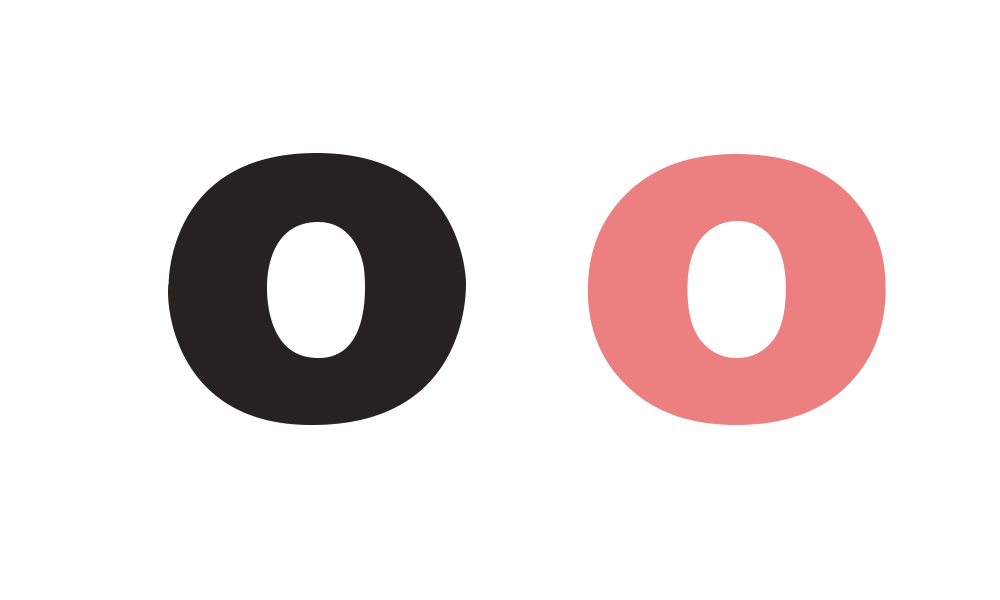
<style>
.page{position:relative;width:1000px;height:600px;background:#ffffff}
.page>*{position:absolute;margin:0}
.t1{font:500px "Arial-Black";color:#ec7f7f}
</style>
<div class="page">
<p class="t1" style="left:587px;top:154px;width:299px;height:271px">o</p>
</div>
